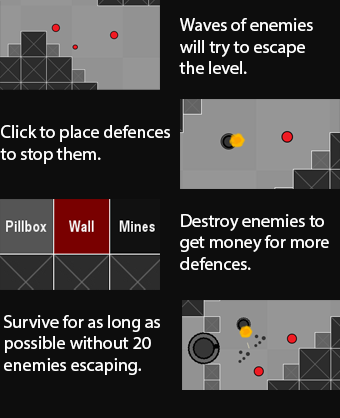
<style>
.page{position:relative;width:340px;height:418px;background:#0d0d0d}
.page>*{position:absolute;margin:0}
.t1{font:18px "MyriadPro-Regular";color:#ffffff}
</style>
<div class="page">
<p class="t1" style="left:179px;top:18px;width:134px;height:56px">Waves of enemies <br>will try to escape <br>the level.</p>
<p class="t1" style="left:0px;top:125px;width:170px;height:39px">Click to place defences <br>to stop them.</p>
<p class="t1" style="left:180px;top:214px;width:149px;height:56px">Destroy enemies to get money for more defences.</p>
<p class="t1" style="left:4px;top:315px;width:156px;height:60px">Survive for as long as possible without 20 enemies escaping.</p>
</div>
